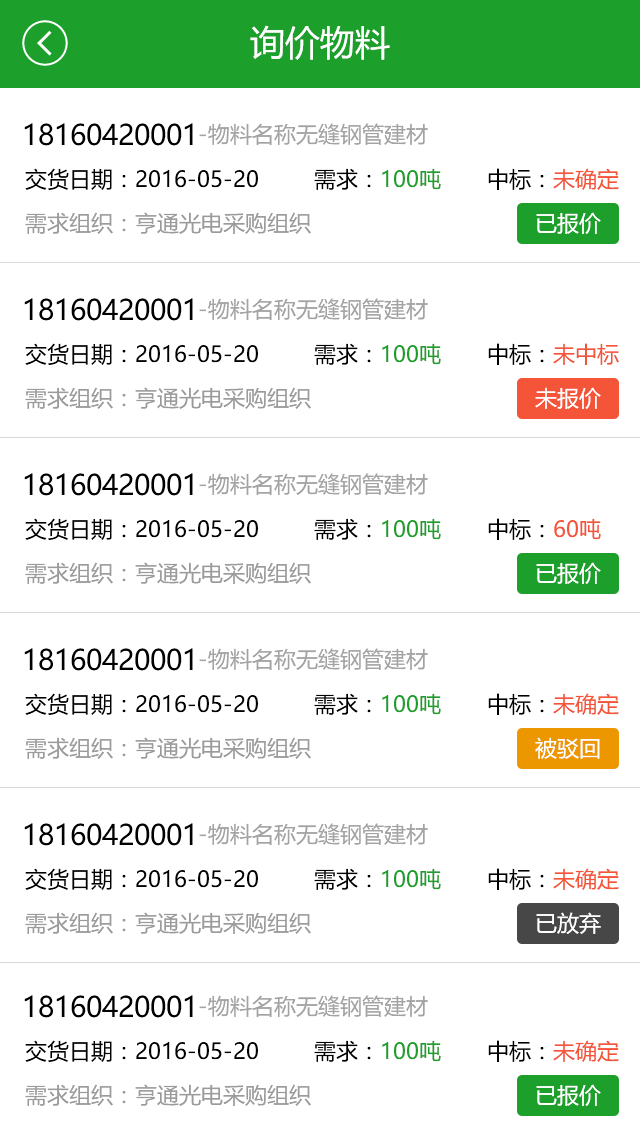
<style>
.page{position:relative;width:640px;height:1136px;background:#ffffff}
.page>*{position:absolute;margin:0}
.t1{font:35px "MicrosoftYaHei";color:#ffffff}
.t2{font:28px "MicrosoftYaHei";color:#000000}
.t3{font:22px "MicrosoftYaHei";color:#a3a3a3}
.t4{font:22px "MicrosoftYaHei";color:#000000}
.t5{font:22px "MicrosoftYaHei";color:#1da02b}
.t6{font:22px "MicrosoftYaHei";color:#f45438}
.t7{font:22px "MicrosoftYaHei";color:#9b9b9b}
.t8{font:22px "MicrosoftYaHei";color:#ffffff}
</style>
<div class="page">
<p class="t1" style="left:250px;top:25px;width:140px;height:35px">询价物料</p>
<p class="t2" style="left:24px;top:123px;width:169px;height:23px">18160420001</p>
<p class="t3" style="left:199px;top:123px;width:229px;height:22px">-物料名称无缝钢管建材</p>
<p class="t4" style="left:25px;top:168px;width:233px;height:22px">交货日期：2016-05-20</p>
<p class="t5" style="left:314px;top:168px;width:127px;height:22px"><span class="t4">需求：</span>100吨</p>
<p class="t4" style="left:488px;top:168px;width:131px;height:22px">中标：<span class="t6">未确定</span></p>
<p class="t7" style="left:25px;top:212px;width:286px;height:22px">需求组织：亨通光电采购组织</p>
<p class="t8" style="left:536px;top:212px;width:65px;height:22px">已报价</p>
<p class="t2" style="left:24px;top:298px;width:169px;height:23px">18160420001</p>
<p class="t3" style="left:199px;top:298px;width:229px;height:22px">-物料名称无缝钢管建材</p>
<p class="t4" style="left:25px;top:343px;width:233px;height:22px">交货日期：2016-05-20</p>
<p class="t5" style="left:314px;top:343px;width:127px;height:22px"><span class="t4">需求：</span>100吨</p>
<p class="t4" style="left:488px;top:343px;width:131px;height:22px">中标：<span class="t6">未中标</span></p>
<p class="t7" style="left:25px;top:387px;width:286px;height:22px">需求组织：亨通光电采购组织</p>
<p class="t8" style="left:535px;top:387px;width:66px;height:22px">未报价</p>
<p class="t2" style="left:24px;top:473px;width:169px;height:23px">18160420001</p>
<p class="t3" style="left:199px;top:473px;width:229px;height:22px">-物料名称无缝钢管建材</p>
<p class="t4" style="left:25px;top:518px;width:233px;height:22px">交货日期：2016-05-20</p>
<p class="t5" style="left:314px;top:518px;width:127px;height:22px"><span class="t4">需求：</span>100吨</p>
<p class="t4" style="left:488px;top:518px;width:113px;height:22px">中标：<span class="t6">60吨</span></p>
<p class="t7" style="left:25px;top:562px;width:286px;height:22px">需求组织：亨通光电采购组织</p>
<p class="t8" style="left:536px;top:562px;width:65px;height:22px">已报价</p>
<p class="t2" style="left:24px;top:648px;width:169px;height:23px">18160420001</p>
<p class="t3" style="left:199px;top:648px;width:229px;height:22px">-物料名称无缝钢管建材</p>
<p class="t4" style="left:25px;top:693px;width:233px;height:22px">交货日期：2016-05-20</p>
<p class="t5" style="left:314px;top:693px;width:127px;height:22px"><span class="t4">需求：</span>100吨</p>
<p class="t4" style="left:488px;top:693px;width:131px;height:22px">中标：<span class="t6">未确定</span></p>
<p class="t7" style="left:25px;top:737px;width:286px;height:22px">需求组织：亨通光电采购组织</p>
<p class="t8" style="left:535px;top:737px;width:65px;height:22px">被驳回</p>
<p class="t2" style="left:24px;top:823px;width:169px;height:23px">18160420001</p>
<p class="t3" style="left:199px;top:823px;width:229px;height:22px">-物料名称无缝钢管建材</p>
<p class="t4" style="left:25px;top:868px;width:233px;height:22px">交货日期：2016-05-20</p>
<p class="t5" style="left:314px;top:868px;width:127px;height:22px"><span class="t4">需求：</span>100吨</p>
<p class="t4" style="left:488px;top:868px;width:131px;height:22px">中标：<span class="t6">未确定</span></p>
<p class="t7" style="left:25px;top:912px;width:286px;height:22px">需求组织：亨通光电采购组织</p>
<p class="t8" style="left:536px;top:912px;width:65px;height:22px">已放弃</p>
<p class="t2" style="left:24px;top:995px;width:169px;height:23px">18160420001</p>
<p class="t3" style="left:199px;top:995px;width:229px;height:22px">-物料名称无缝钢管建材</p>
<p class="t4" style="left:25px;top:1040px;width:233px;height:22px">交货日期：2016-05-20</p>
<p class="t5" style="left:314px;top:1040px;width:127px;height:22px"><span class="t4">需求：</span>100吨</p>
<p class="t4" style="left:488px;top:1040px;width:131px;height:22px">中标：<span class="t6">未确定</span></p>
<p class="t7" style="left:25px;top:1084px;width:286px;height:22px">需求组织：亨通光电采购组织</p>
<p class="t8" style="left:536px;top:1084px;width:65px;height:22px">已报价</p>
</div>
